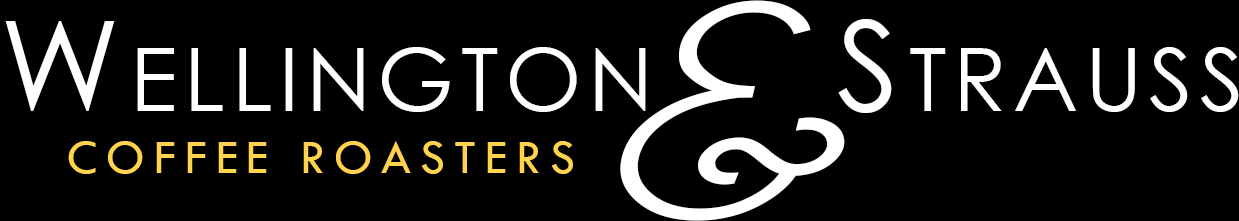
<style>
.page{position:relative;width:1239px;height:221px;background:#000000}
.page>*{position:absolute;margin:0}
.t1{font:275px "CaviarDreams-Italic";color:#ffffff;scale:1.43 1}
.t2{font:125px "CenturyGothic";letter-spacing:0.08em;color:#ffffff;font-variant:small-caps}
.t3{font:50px "TwCenMT-Regular";letter-spacing:0.18em;color:#ffd34e}
</style>
<div class="page">
<p class="t1" style="left:620px;top:0px;width:225px;height:221px">&amp;</p>
<p class="t2" style="left:5px;top:19px;width:1234px;height:94px">Wellington     Strauss</p>
<p class="t3" style="left:68px;top:141px;width:505px;height:33px">COFFEE ROASTERS</p>
</div>
